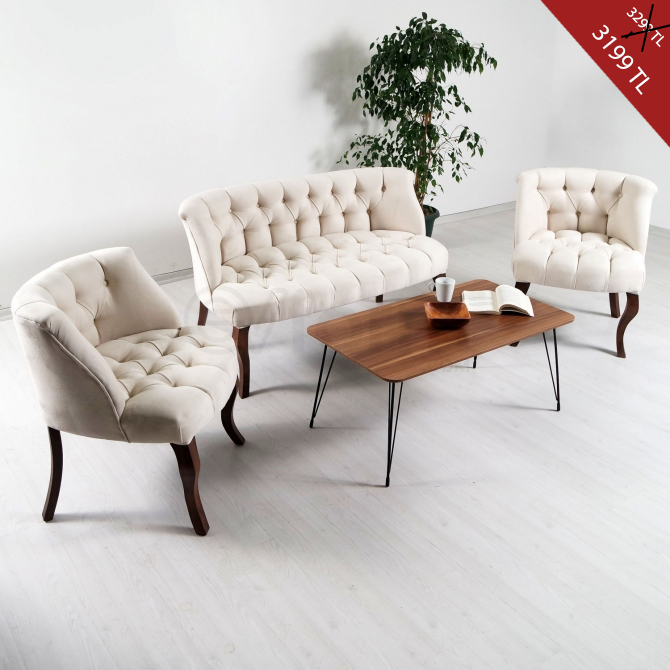
<style>
.page{position:relative;width:670px;height:670px}
.page>*{position:absolute;margin:0}
.t1{font:15px "MyriadPro-Regular";color:#ffffff}
.t2{font:25px "MyriadPro-Regular";color:#ffffff}
</style>
<div class="page">
<p class="t1" style="left:626px;top:7px;width:38px;height:40px;rotate:46deg">3299 TL</p>
<p class="t2" style="left:592px;top:24px;width:58px;height:71px;rotate:51deg">3199 TL</p>
</div>
